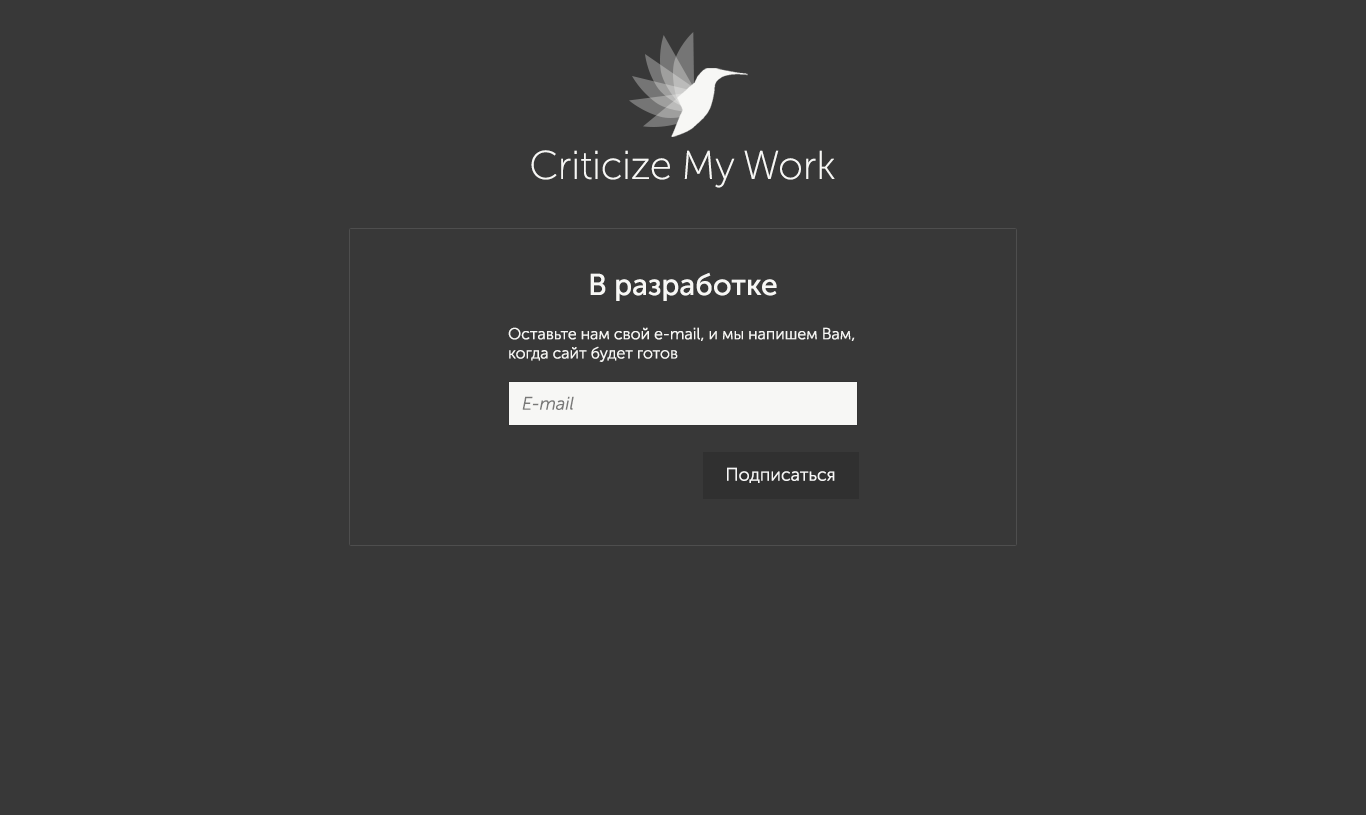
<style>
.page{position:relative;width:1366px;height:815px;background:#383838}
.page>*{position:absolute;margin:0}
.t1{font:40px "MuseoSansCyrl-100";color:#f7f7f5}
.t2{font:30px "MuseoSansCyrl-500";color:#f7f7f5}
.t3{font:16px "MuseoSansCyrl-300";color:#f7f7f5}
.t4{font:18px "MuseoSansCyrl-300Italic";color:#797978}
.t5{font:18px "MuseoSansCyrl-300";color:#f6f6f6}
</style>
<div class="page">
<p class="t1" style="left:531px;top:150px;width:304px;height:38px">Criticize My Work</p>
<p class="t2" style="left:590px;top:272px;width:187px;height:29px">В разработке</p>
<p class="t3" style="left:508px;top:327px;width:347px;height:35px;text-align:right">Оставьте нам свой e-mail, и мы напишем Вам, когда сайт будет готов</p>
<p class="t4" style="left:522px;top:396px;width:52px;height:14px">E-mail</p>
<p class="t5" style="left:727px;top:467px;width:108px;height:16px">Подписаться</p>
</div>
